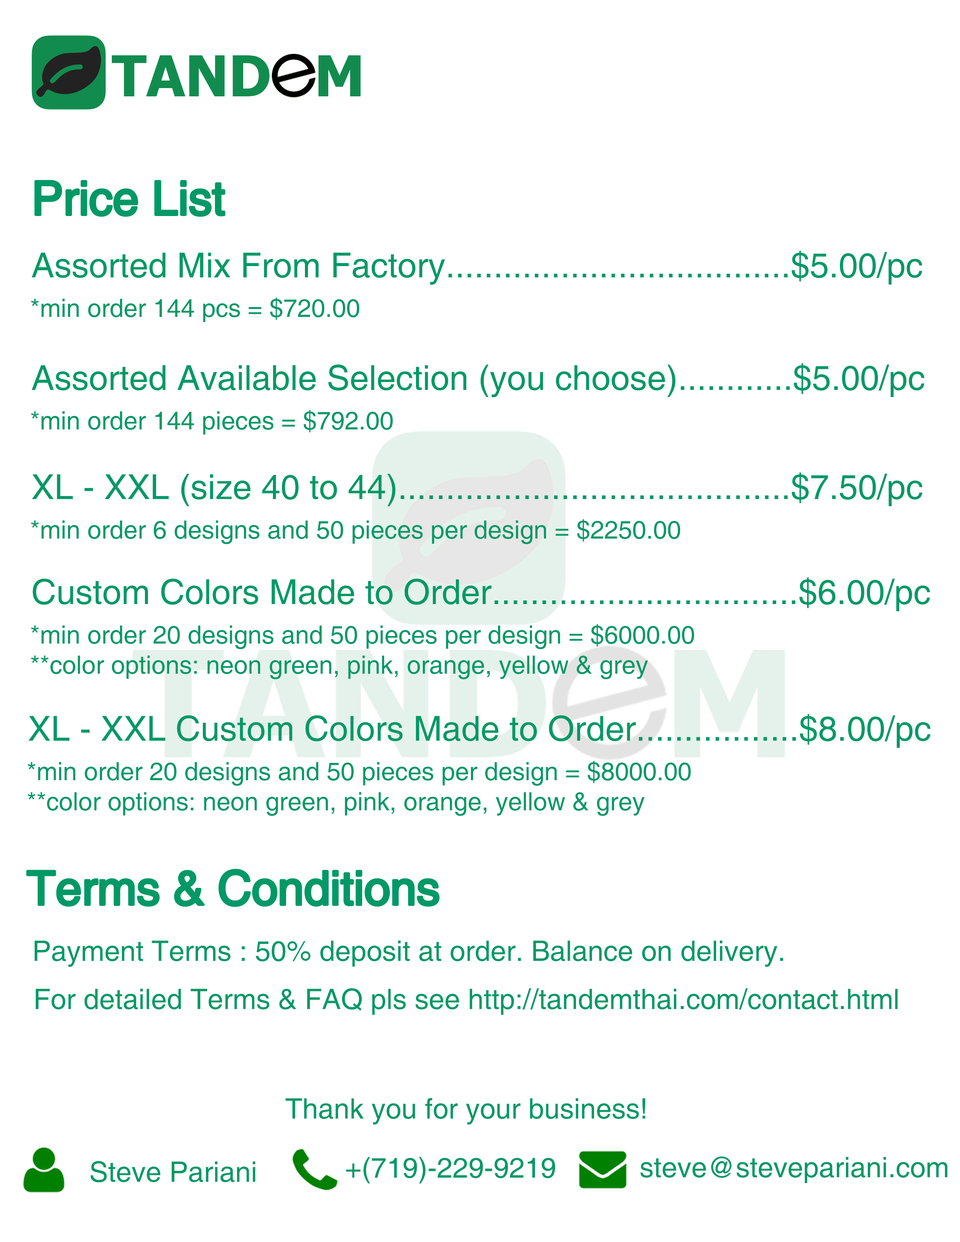
<style>
.page{position:relative;width:960px;height:1242px;background:#ffffff}
.page>*{position:absolute;margin:0}
.t1{font:47.1px "Helvetica";color:#009966}
.t2{font:34.5px "Helvetica";color:#009966}
.t3{font:25.1px "Helvetica";color:#009966}
.t4{font:28.2px "Helvetica";color:#009966}
</style>
<div class="page">
<p class="t1" style="left:35px;top:181px;width:189px;height:35px">Price List</p>
<p class="t2" style="left:32px;top:251px;width:890px;height:34px">Assorted Mix From Factory....................................$5.00/pc</p>
<p class="t3" style="left:31px;top:297px;width:328px;height:25px">*min order 144 pcs = $720.00</p>
<p class="t2" style="left:32px;top:363px;width:893px;height:35px">Assorted Available Selection (you choose)............$5.00/pc</p>
<p class="t3" style="left:31px;top:410px;width:362px;height:25px">*min order 144 pieces = $792.00</p>
<p class="t2" style="left:32px;top:472px;width:890px;height:34px">XL - XXL (size 40 to 44).........................................$7.50/pc</p>
<p class="t3" style="left:31px;top:519px;width:649px;height:25px">*min order 6 designs and 50 pieces per design = $2250.00</p>
<p class="t2" style="left:33px;top:577px;width:897px;height:34px">Custom Colors Made to Order................................$6.00/pc</p>
<p class="t3" style="left:31px;top:624px;width:663px;height:55px">*min order 20 designs and 50 pieces per design = $6000.00<br>**color options: neon green, pink, orange, yellow &amp; grey</p>
<p class="t2" style="left:28px;top:714px;width:903px;height:34px">XL - XXL Custom Colors Made to Order.................$8.00/pc</p>
<p class="t3" style="left:27px;top:761px;width:664px;height:55px">*min order 20 designs and 50 pieces per design = $8000.00<br>**color options: neon green, pink, orange, yellow &amp; grey</p>
<p class="t1" style="left:27px;top:870px;width:412px;height:36px">Terms &amp; Conditions</p>
<p class="t4" style="left:35px;top:941px;width:748px;height:26px">Payment Terms : 50% deposit at order. Balance on delivery.</p>
<p class="t4" style="left:36px;top:988px;width:862px;height:27px">For detailed Terms &amp; FAQ pls see http://tandemthai.com/contact.html</p>
<p class="t4" style="left:285px;top:1098px;width:360px;height:27px">Thank you for your business!</p>
<p class="t4" style="left:346px;top:1157px;width:209px;height:27px">+(719)-229-9219</p>
<p class="t4" style="left:640px;top:1156px;width:307px;height:28px">steve@stevepariani.com</p>
<p class="t4" style="left:90px;top:1161px;width:165px;height:22px">Steve Pariani</p>
</div>
